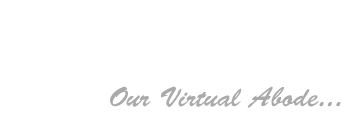
<style>
.page{position:relative;width:361px;height:125px;background:#ffffff}
.page>*{position:absolute;margin:0}
.t1{font:28px "BrushScriptStd";color:#aaaaaa}
</style>
<div class="page">
<p class="t1" style="left:110px;top:86px;width:231px;height:22px">Our Virtual Abode...</p>
</div>
